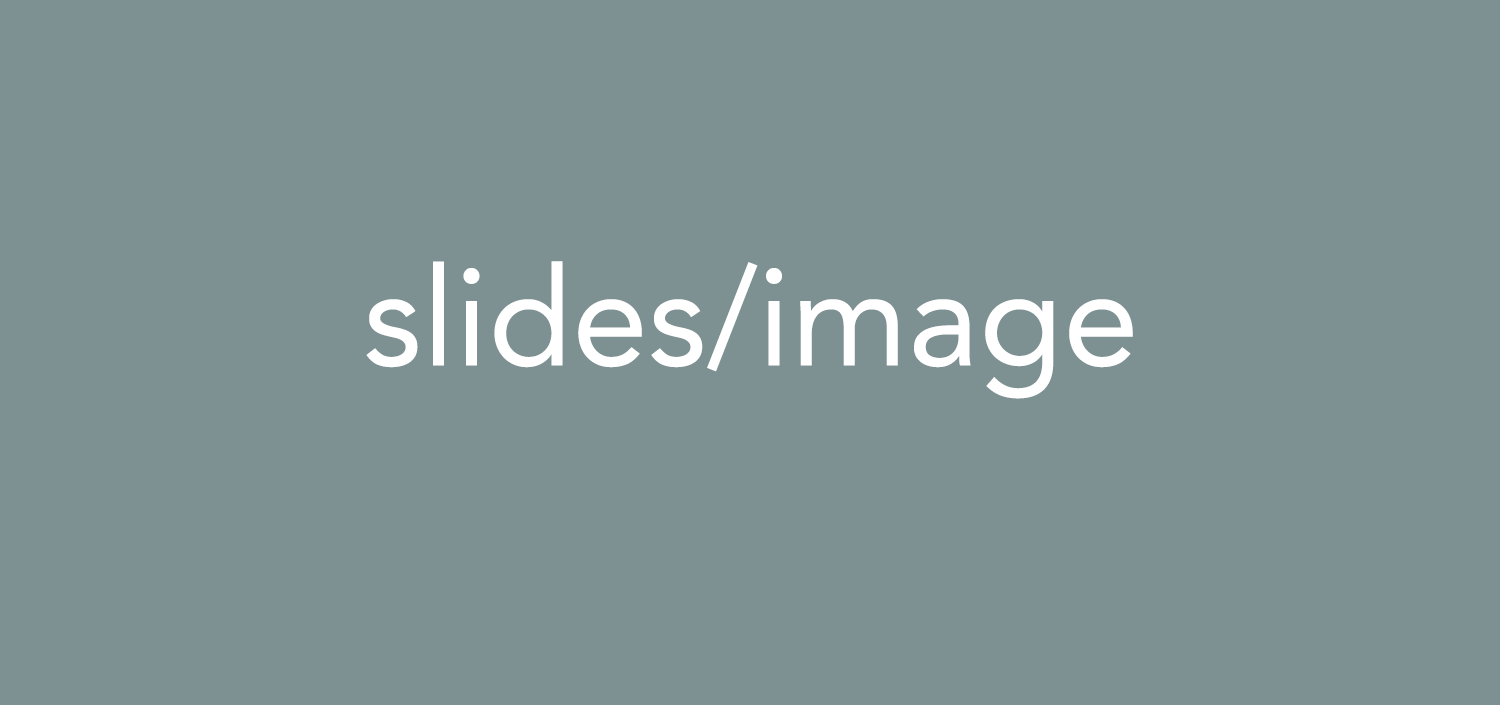
<style>
.page{position:relative;width:1500px;height:705px;background:#7d9092}
.page>*{position:absolute;margin:0}
.t1{font:137.3px "Avenir-Roman";color:#ffffff}
</style>
<div class="page">
<p class="t1" style="left:366px;top:261px;width:767px;height:138px">slides/image</p>
</div>
